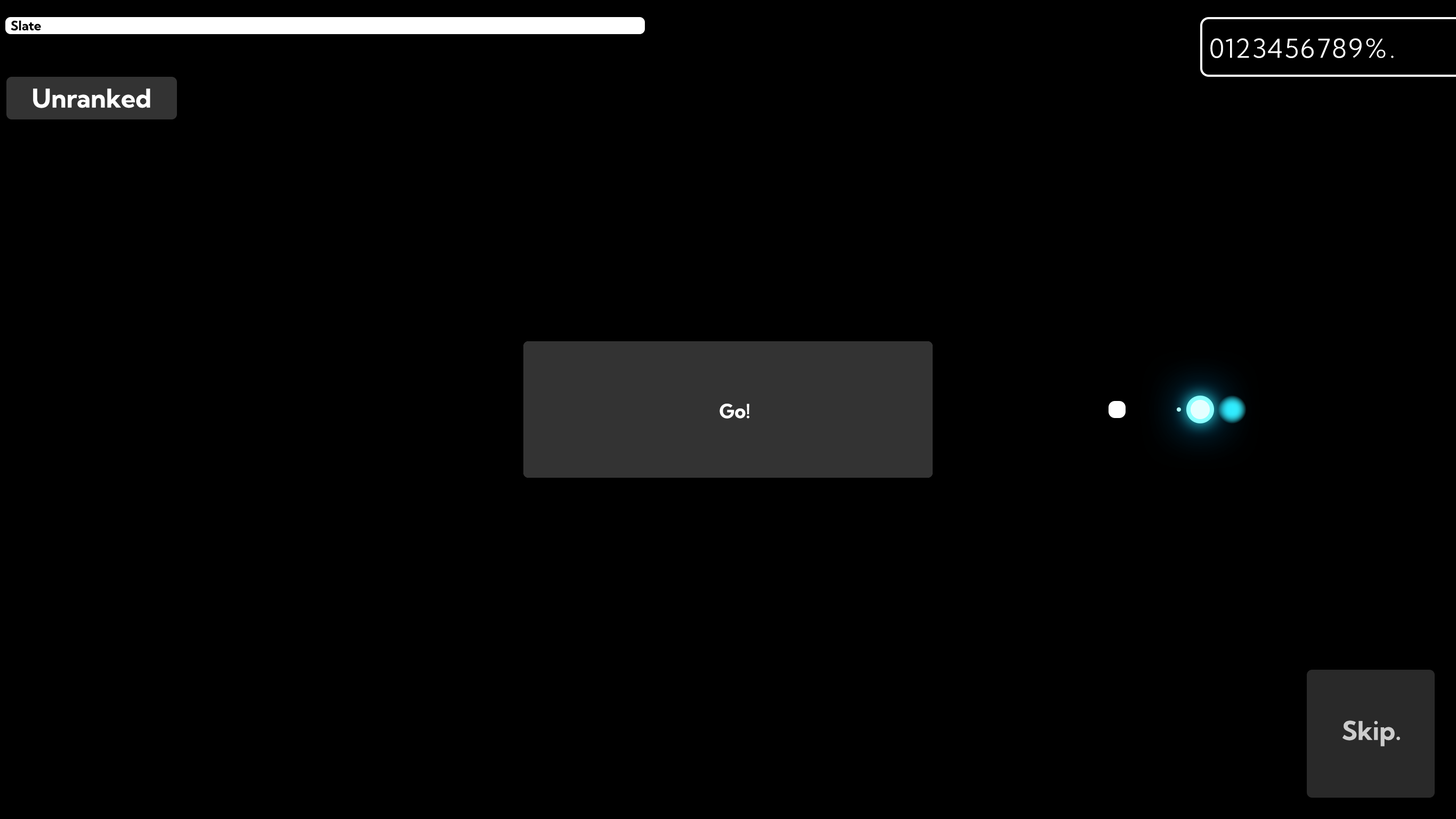
<style>
.page{position:relative;width:1456px;height:819px;background:#000000}
.page>*{position:absolute;margin:0}
.t1{font:12.8px "KumbhSans-Bold";color:#000000}
.t2{font:25.6px "KumbhSans-Light";color:#ffffff}
.t3{font:25.6px "KumbhSans-Bold";color:#ffffff}
.t4{font:19.2px "KumbhSans-Bold";color:#ffffff}
.t5{font:25.6px "KumbhSans-Bold";color:#cccccc}
</style>
<div class="page">
<p class="t1" style="left:11px;top:20px;width:30px;height:11px">Slate</p>
<p class="t1" style="left:11px;top:20px;width:30px;height:11px">Slate</p>
<p class="t2" style="left:1211px;top:38px;width:12px;height:20px">0</p>
<p class="t2" style="left:1226px;top:38px;width:6px;height:20px">1</p>
<p class="t2" style="left:1237px;top:38px;width:13px;height:20px">2</p>
<p class="t2" style="left:1254px;top:38px;width:11px;height:20px">3</p>
<p class="t2" style="left:1268px;top:38px;width:14px;height:20px">4</p>
<p class="t2" style="left:1286px;top:38px;width:12px;height:20px">5</p>
<p class="t2" style="left:1302px;top:38px;width:12px;height:20px">6</p>
<p class="t2" style="left:1318px;top:38px;width:12px;height:20px">7</p>
<p class="t2" style="left:1333px;top:38px;width:13px;height:20px">8</p>
<p class="t2" style="left:1350px;top:38px;width:12px;height:20px">9</p>
<p class="t2" style="left:1366px;top:38px;width:20px;height:20px">%</p>
<p class="t2" style="left:1391px;top:55px;width:3px;height:3px">.</p>
<p class="t3" style="left:33px;top:88px;width:117px;height:20px">Unranked</p>
<p class="t4" style="left:720px;top:404px;width:30px;height:14px">Go!</p>
<p class="t5" style="left:1343px;top:720px;width:57px;height:26px">Skip.</p>
</div>
